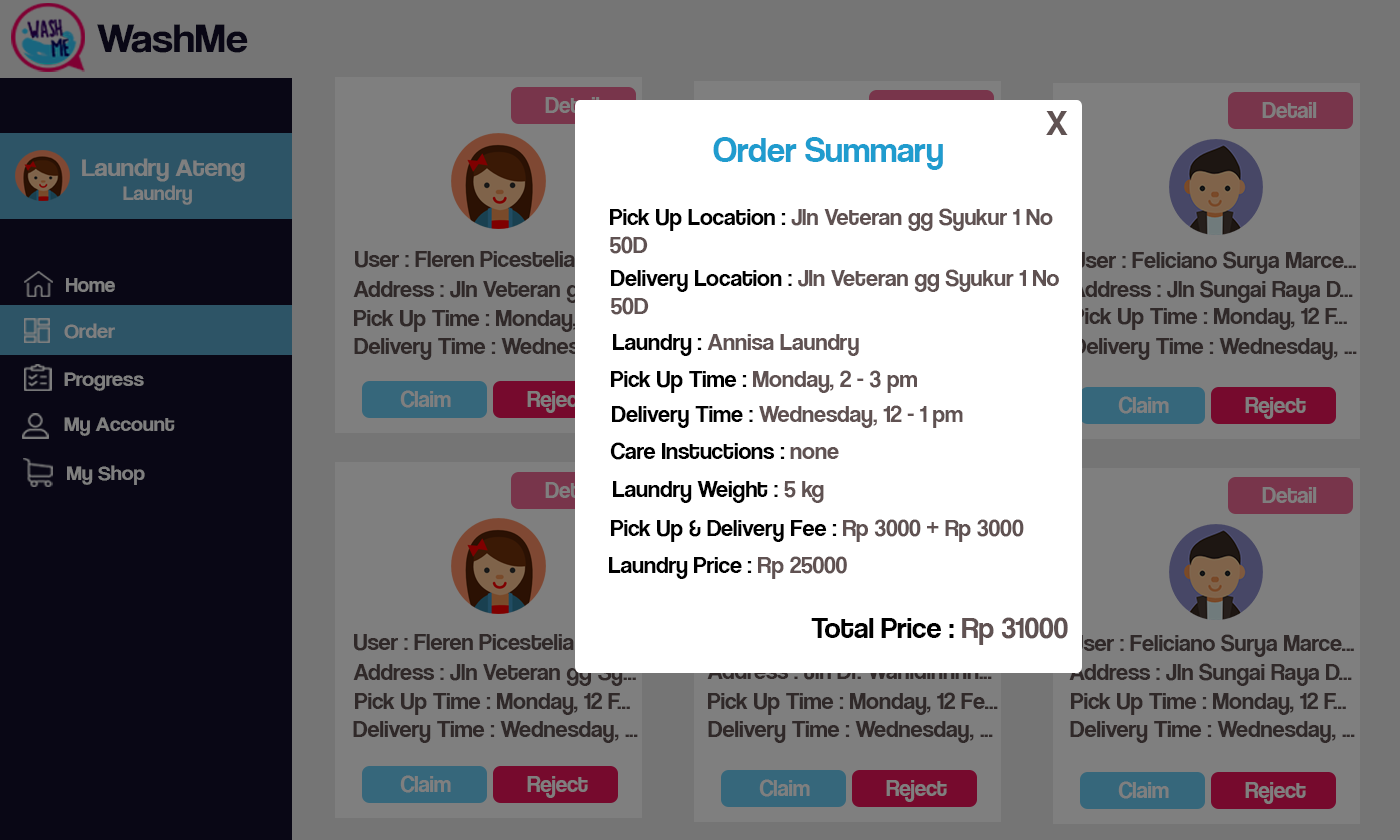
<style>
.page{position:relative;width:1400px;height:840px;background:#7f7f7f}
.page>*{position:absolute;margin:0}
.t1{font:42.1px "CoolveticaRg-Regular";color:#120f2b;scale:1.05 1}
.t2{font:22.7px "CoolveticaRg-Regular"}
.t3{font:22.7px "CoolveticaRg-Regular";color:#7f7f7f}
.t4{font:36px "CoolveticaRg-Regular";color:#605252}
.t5{font:36px "CoolveticaRg-Regular";color:#209cce}
.t6{font:25.2px "CoolveticaRg-Regular";color:#7f7f7f;scale:1.05 1}
.t7{font:20px "CoolveticaRg-Regular";color:#7f7f7f;scale:1.05 1}
.t8{font:24px "CoolveticaRg-Regular";color:#605252}
.t9{font:24px "CoolveticaRg-Regular";color:#000000}
.t10{font:24px "CoolveticaRg-Regular";color:#302929}
.t11{font:21px "CoolveticaRg-Regular";color:#7f7f7f}
.t12{font:21px "CoolveticaRg-Regular";color:#7f7f7f;scale:1.05 1}
.t13{font:30px "CoolveticaRg-Regular";color:#000000}
.t14{font:30px "CoolveticaRg-Regular";color:#605252}
</style>
<div class="page">
<p class="t1" style="left:97px;top:24px;width:151px;height:29px">WashMe</p>
<p class="t2" style="left:545px;top:97px;width:55px;height:16px">Detail</p>
<p class="t3" style="left:1262px;top:102px;width:55px;height:16px">Detail</p>
<p class="t4" style="left:1046px;top:111px;width:22px;height:24px">X</p>
<p class="t5" style="left:713px;top:137px;width:230px;height:33px">Order Summary</p>
<p class="t6" style="left:82px;top:158px;width:163px;height:47px">Laundry Ateng<br><span class="t7">        Laundry</span></p>
<p class="t8" style="left:610px;top:208px;width:443px;height:46px"><span class="t9">Pick Up Location : </span>Jln Veteran gg Syukur 1 No<br>50D</p>
<p class="t10" style="left:355px;top:251px;width:220px;height:17px">User : Fleren Picestelia</p>
<p class="t10" style="left:1072px;top:251px;width:284px;height:23px">User : Feliciano Surya Marce...</p>
<p class="t8" style="left:611px;top:269px;width:448px;height:46px"><span class="t9">Delivery Location : </span>Jln Veteran gg Syukur 1 No<br>50D</p>
<p class="t11" style="left:66px;top:278px;width:49px;height:14px">Home</p>
<p class="t10" style="left:1070px;top:280px;width:283px;height:23px">Address : Jln Sungai Raya D...</p>
<p class="t10" style="left:354px;top:309px;width:275px;height:23px">Pick Up Time : Monday, 12 F...</p>
<p class="t10" style="left:1072px;top:307px;width:275px;height:23px">Pick Up Time : Monday, 12 F...</p>
<p class="t12" style="left:64px;top:323px;width:51px;height:16px">Order</p>
<p class="t10" style="left:354px;top:338px;width:279px;height:22px">Delivery Time : Wednesday,...</p>
<p class="t8" style="left:613px;top:334px;width:246px;height:22px"><span class="t9">Laundry : </span>Annisa Laundry</p>
<p class="t10" style="left:1072px;top:338px;width:285px;height:22px">Delivery Time : Wednesday, ...</p>
<p class="t12" style="left:64px;top:372px;width:80px;height:19px">Progress</p>
<p class="t8" style="left:611px;top:370px;width:306px;height:23px"><span class="t9">Pick Up Time : </span>Monday, 2 - 3 pm</p>
<p class="t3" style="left:400px;top:390px;width:51px;height:18px">Claim</p>
<p class="t3" style="left:527px;top:391px;width:61px;height:22px">Reject</p>
<p class="t3" style="left:1118px;top:396px;width:51px;height:18px">Claim</p>
<p class="t3" style="left:1245px;top:397px;width:61px;height:22px">Reject</p>
<p class="t8" style="left:612px;top:405px;width:351px;height:23px"><span class="t9">Delivery Time : </span>Wednesday, 12 - 1 pm</p>
<p class="t12" style="left:64px;top:417px;width:111px;height:19px">My Account</p>
<p class="t9" style="left:610px;top:442px;width:229px;height:18px">Care Instuctions : <span class="t8">none</span></p>
<p class="t12" style="left:67px;top:465px;width:78px;height:20px">My Shop</p>
<p class="t9" style="left:613px;top:481px;width:211px;height:22px">Laundry Weight : <span class="t8">5 kg</span></p>
<p class="t3" style="left:1262px;top:487px;width:55px;height:16px">Detail</p>
<p class="t9" style="left:611px;top:519px;width:413px;height:23px">Pick Up &amp; Delivery Fee : <span class="t8">Rp 3000 + Rp 3000</span></p>
<p class="t9" style="left:609px;top:556px;width:238px;height:23px">Laundry Price : <span class="t8">Rp 25000</span></p>
<p class="t13" style="left:811px;top:617px;width:257px;height:28px">Total Price : <span class="t14">Rp 31000</span></p>
<p class="t10" style="left:354px;top:634px;width:220px;height:17px">User : Fleren Picestelia</p>
<p class="t10" style="left:1070px;top:634px;width:284px;height:23px">User : Feliciano Surya Marce...</p>
<p class="t10" style="left:353px;top:663px;width:283px;height:23px">Address : Jln Veteran gg Sy...</p>
<p class="t10" style="left:1069px;top:663px;width:283px;height:23px">Address : Jln Sungai Raya D...</p>
<p class="t10" style="left:355px;top:692px;width:275px;height:23px">Pick Up Time : Monday, 12 F...</p>
<p class="t10" style="left:708px;top:692px;width:290px;height:23px">Pick Up Time : Monday, 12 Fe...</p>
<p class="t10" style="left:1071px;top:692px;width:275px;height:23px">Pick Up Time : Monday, 12 F...</p>
<p class="t10" style="left:353px;top:721px;width:285px;height:22px">Delivery Time : Wednesday, ...</p>
<p class="t10" style="left:708px;top:721px;width:285px;height:22px">Delivery Time : Wednesday, ...</p>
<p class="t10" style="left:1070px;top:721px;width:285px;height:22px">Delivery Time : Wednesday, ...</p>
<p class="t3" style="left:400px;top:775px;width:51px;height:18px">Claim</p>
<p class="t3" style="left:527px;top:776px;width:61px;height:22px">Reject</p>
<p class="t3" style="left:759px;top:779px;width:51px;height:18px">Claim</p>
<p class="t3" style="left:886px;top:780px;width:61px;height:22px">Reject</p>
<p class="t3" style="left:1118px;top:781px;width:51px;height:18px">Claim</p>
<p class="t3" style="left:1245px;top:782px;width:61px;height:22px">Reject</p>
</div>
